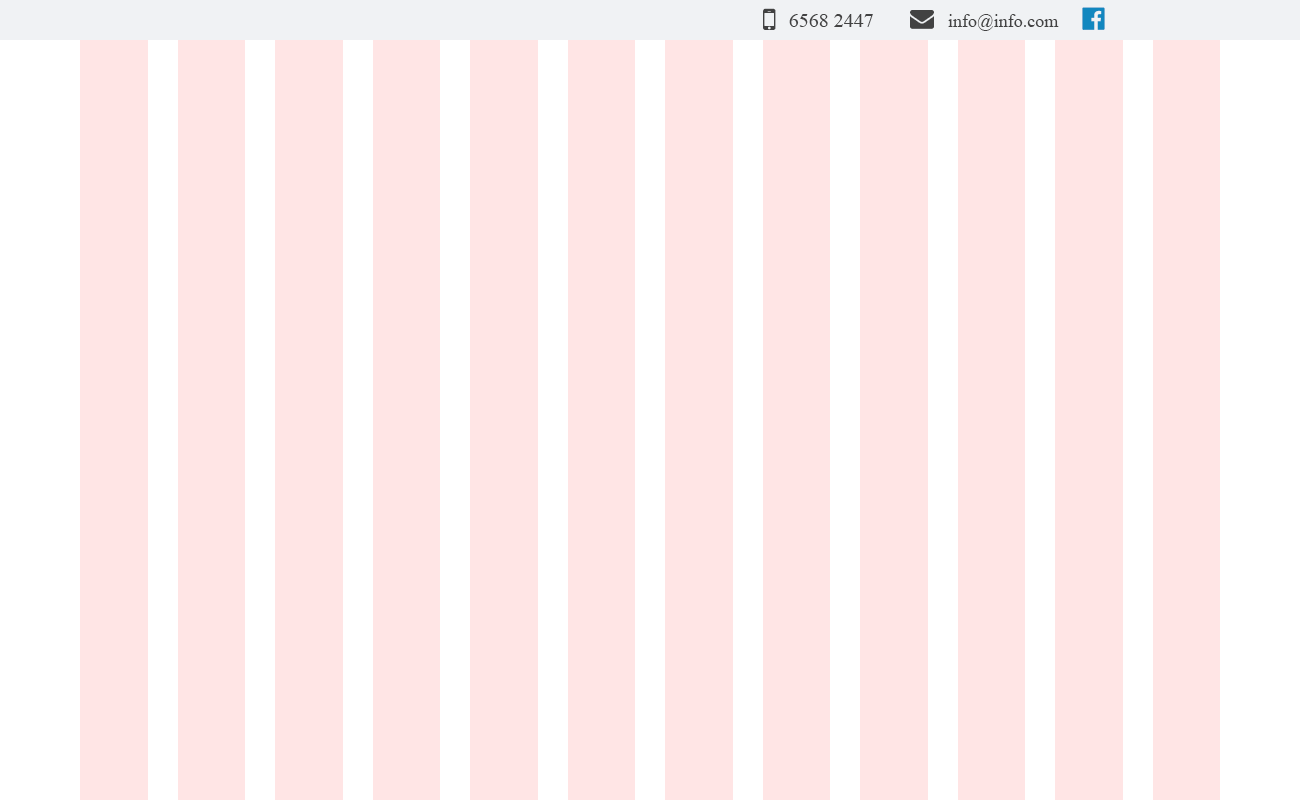
<style>
.page{position:relative;width:1300px;height:800px;background:#ffe5e5}
.page>*{position:absolute;margin:0}
.t1{font:20px "TimesNewRomanPSMT";color:#424242}
.t2{font:18px "TimesNewRomanPSMT";color:#424242}
</style>
<div class="page">
<p class="t1" style="left:789px;top:14px;width:84px;height:13px">6568 2447</p>
<p class="t2" style="left:948px;top:14px;width:111px;height:17px">info@info.com</p>
</div>
